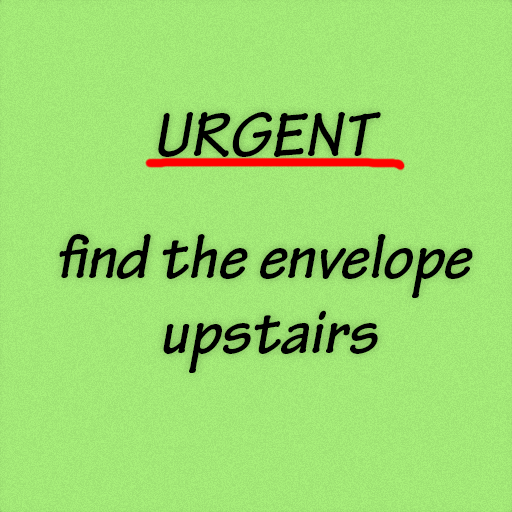
<style>
.page{position:relative;width:512px;height:512px}
.page>*{position:absolute;margin:0}
.t1{font:67.3px/83.4px "TektonPro-BoldObl";color:#000000}
.t2{font:67.3px/54.2px "TektonPro-BoldObl";color:#000000}
</style>
<div class="page">
<p class="t1" style="left:59px;top:112px;width:414px;height:261px;text-align:center"><span class="t2">URGENT<br><br></span>find the envelope<br> upstairs</p>
</div>
